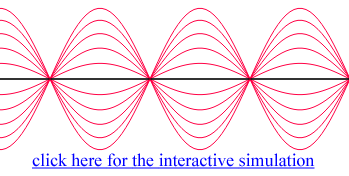
<style>
.page{position:relative;width:349px;height:176px;background:#ffffff}
.page>*{position:absolute;margin:0}
.t1{font:17.9px "TimesNewRomanPSMT";color:#0000ff;text-decoration:underline}
</style>
<div class="page">
<p class="t1" style="left:32px;top:153px;width:283px;height:16px">click here for the interactive simulation</p>
</div>
